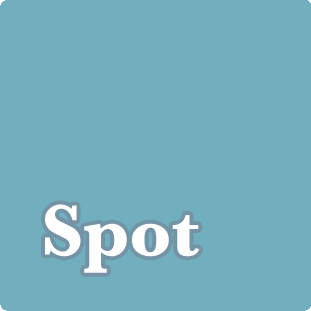
<style>
.page{position:relative;width:311px;height:311px;background:#71afbe}
.page>*{position:absolute;margin:0}
.t1{font:75px "Baskerville-Bold";color:#ffffff}
</style>
<div class="page">
<p class="t1" style="left:45px;top:204px;width:155px;height:69px">Spot</p>
</div>
